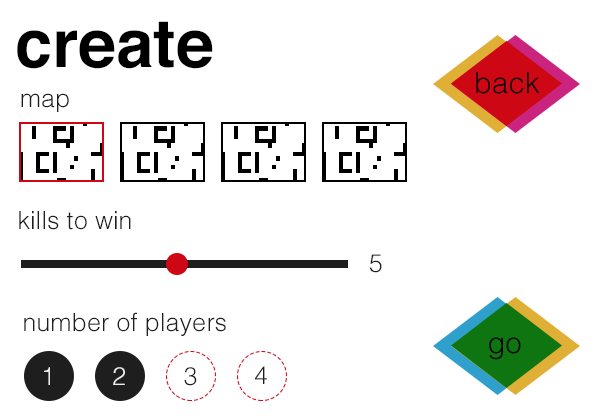
<style>
.page{position:relative;width:600px;height:420px;background:#ffffff}
.page>*{position:absolute;margin:0}
.t1{font:66.7px "Helvetica-Bold";letter-spacing:0.005em;color:#000000}
.t2{font:29.2px "Helvetica-Light";letter-spacing:0.005em;color:#000000}
.t3{font:25px "Helvetica-Light";letter-spacing:0.005em;color:#1e1e1e}
.t4{font:25px "Helvetica-Light";letter-spacing:0.005em;color:#ececec}
</style>
<div class="page">
<p class="t1" style="left:17px;top:21px;width:196px;height:48px">create</p>
<p class="t2" style="left:476px;top:72px;width:64px;height:22px">back</p>
<p class="t3" style="left:21px;top:93px;width:48px;height:19px">map</p>
<p class="t3" style="left:19px;top:211px;width:112px;height:19px">kills to win</p>
<p class="t3" style="left:369px;top:254px;width:13px;height:19px">5</p>
<p class="t3" style="left:24px;top:312px;width:202px;height:24px">number of players</p>
<p class="t2" style="left:489px;top:337px;width:32px;height:23px">go</p>
<p class="t3" style="left:255px;top:366px;width:12px;height:18px">4</p>
<p class="t4" style="left:44px;top:367px;width:6px;height:18px">1</p>
<p class="t4" style="left:113px;top:367px;width:12px;height:18px">2</p>
<p class="t3" style="left:184px;top:367px;width:13px;height:19px">3</p>
</div>
